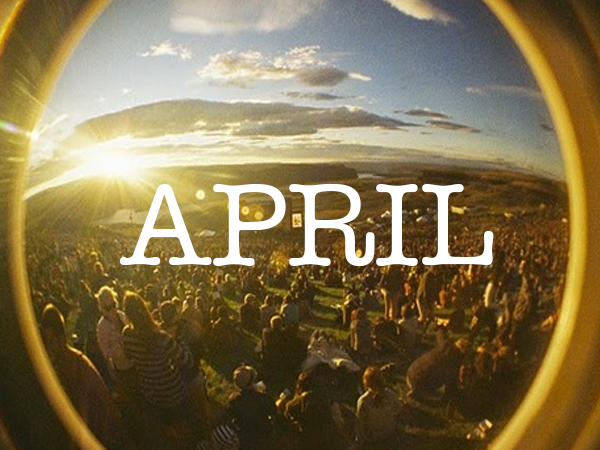
<style>
.page{position:relative;width:600px;height:450px}
.page>*{position:absolute;margin:0}
.t1{font:120px "AmericanTypewriter";color:#ffffff}
</style>
<div class="page">
<p class="t1" style="left:120px;top:184px;width:374px;height:82px">APRIL</p>
</div>
